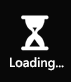
<style>
.page{position:relative;width:71px;height:82px;background:#080808}
.page>*{position:absolute;margin:0}
.t1{font:12px "MicrosoftYaHei";color:#ffffff}
</style>
<div class="page">
<p class="t1" style="left:10px;top:57px;width:54px;height:14px">Loading...</p>
</div>
